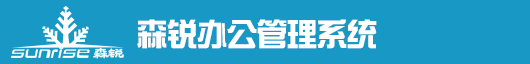
<style>
.page{position:relative;width:530px;height:64px;background:#1798c5}
.page>*{position:absolute;margin:0}
.t1{font:30px "By-JOSSQ-DMF-in-BeiJing";color:#ffffff}
</style>
<div class="page">
<p class="t1" style="left:137px;top:19px;width:240px;height:30px">森锐办公管理系统</p>
</div>
